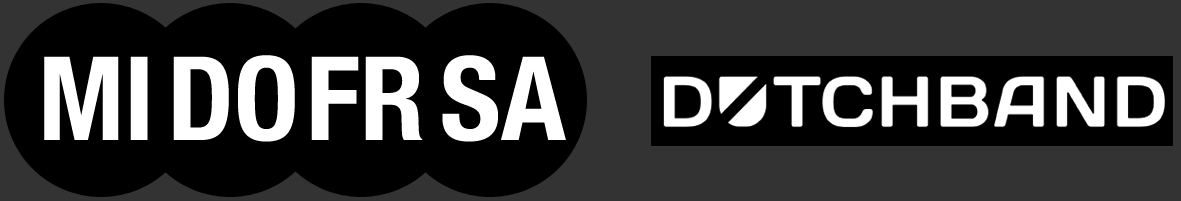
<style>
.page{position:relative;width:1181px;height:201px;background:#000000}
.page>*{position:absolute;margin:0}
.t1{font:116.7px "HelveticaNeueLTStd-BdCn";color:#ffffff}
</style>
<div class="page">
<p class="t1" style="left:44px;top:56px;width:104px;height:84px">MI</p>
<p class="t1" style="left:173px;top:55px;width:122px;height:87px">DO</p>
<p class="t1" style="left:311px;top:56px;width:112px;height:84px">FR</p>
<p class="t1" style="left:442px;top:55px;width:124px;height:87px">SA</p>
</div>
